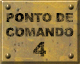
<style>
.page{position:relative;width:80px;height:64px}
.page>*{position:absolute;margin:0}
.t1{font:12px/14.7px "Arial-Black";letter-spacing:-0.015em;text-transform:uppercase}
.t2{font:20px/20px "Arial-Black";letter-spacing:-0.055em;text-transform:uppercase}
</style>
<div class="page">
<p class="t1" style="left:6px;top:13px;width:68px;height:44px;text-align:center">Ponto de<br>comando<br><span class="t2">4</span></p>
</div>
